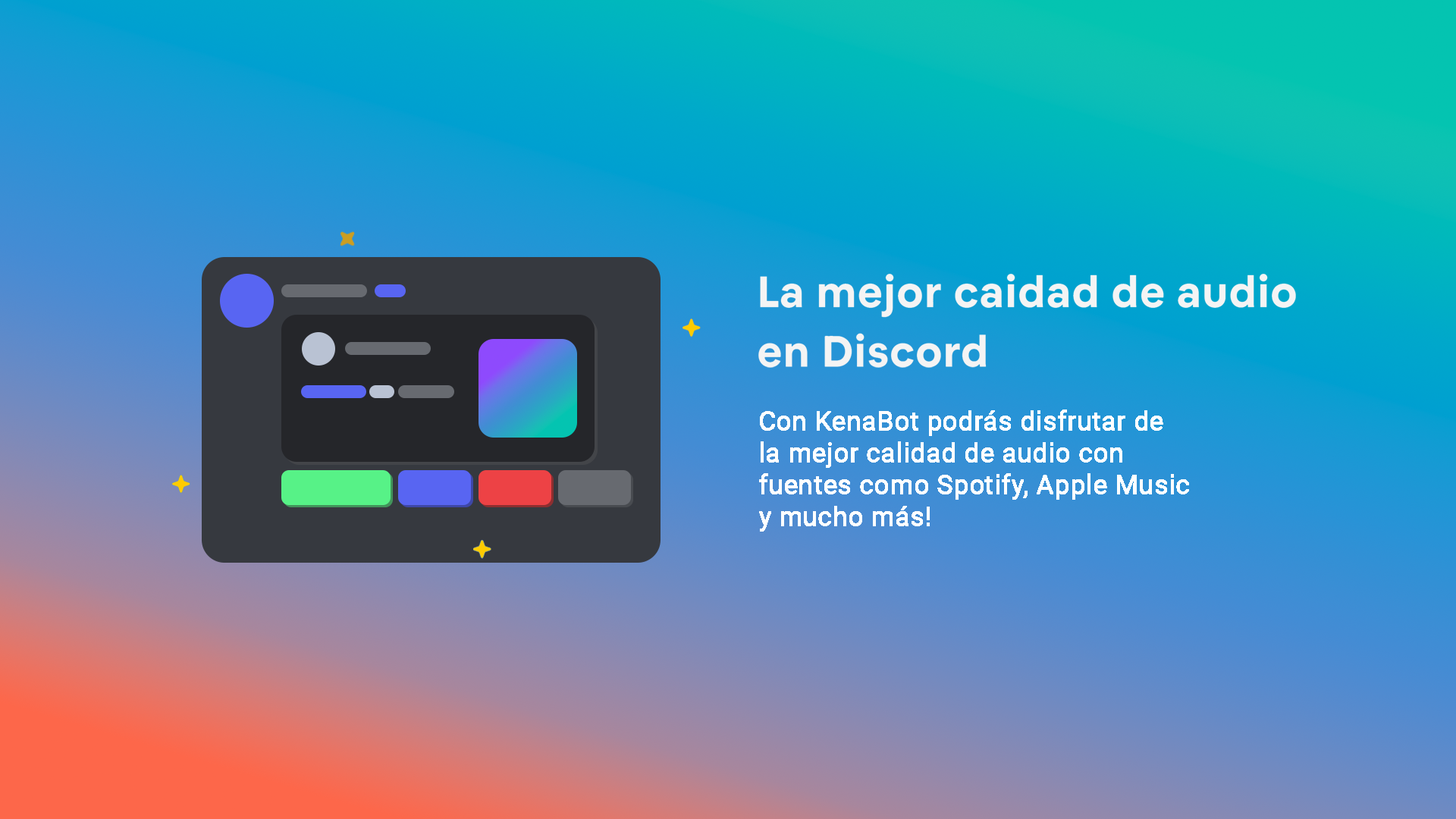
<style>
.page{position:relative;width:1456px;height:819px}
.page>*{position:absolute;margin:0}
.t1{font:26.5px "Roboto-Regular";color:#ffffff;font-weight:bold}
</style>
<div class="page">
<p class="t1" style="left:759px;top:409px;width:430px;height:123px">Con KenaBot podrás disfrutar de<br>la mejor calidad de audio con<br>fuentes como Spotify, Apple Music<br>y mucho más!</p>
</div>
